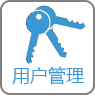
<style>
.page{position:relative;width:95px;height:95px;background:#ffffff}
.page>*{position:absolute;margin:0}
.t1{font:18px "MicrosoftYaHei";color:#3998d6}
</style>
<div class="page">
<p class="t1" style="left:12px;top:66px;width:72px;height:19px">用户管理</p>
</div>
